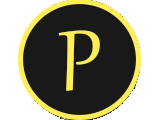
<style>
.page{position:relative;width:160px;height:120px;background:#1a1919}
.page>*{position:absolute;margin:0}
.t1{font:105.4px "Gabriola";color:#ffee57}
</style>
<div class="page">
<p class="t1" style="left:58px;top:30px;width:42px;height:61px">Р</p>
</div>
